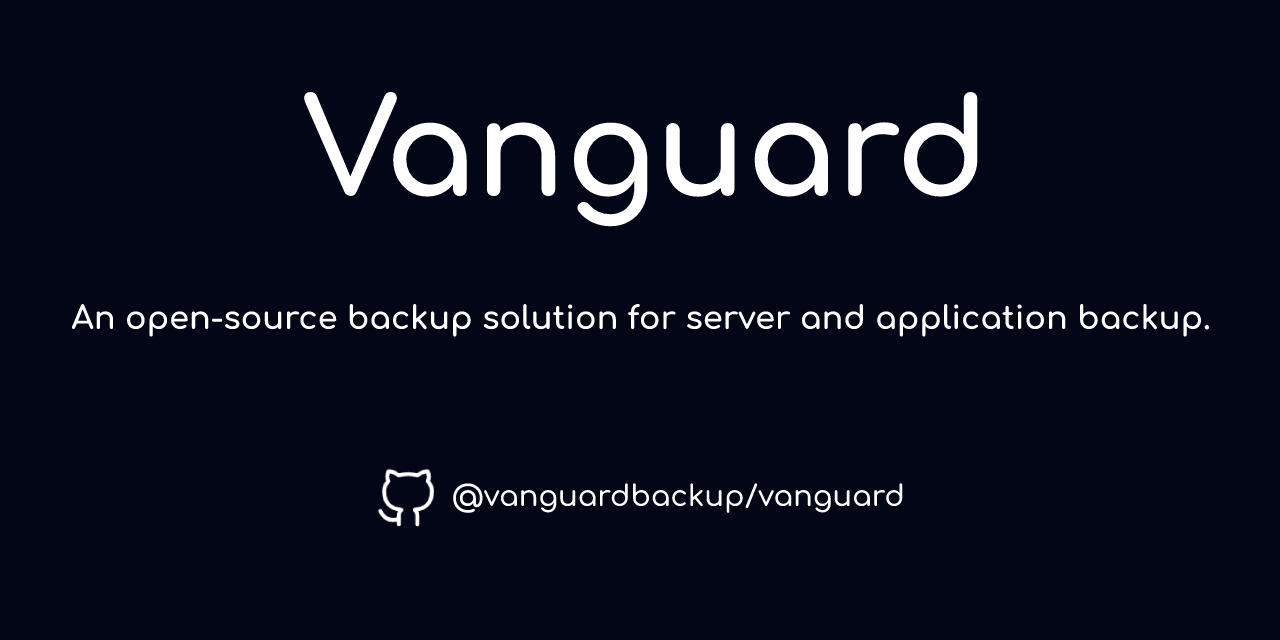
<style>
.page{position:relative;width:1280px;height:640px;background:#020617}
.page>*{position:absolute;margin:0}
.t1{font:133.2px "Comfortaa-Bold";color:#ffffff}
.t2{font:32px "Comfortaa-Bold";color:#ffffff}
.t3{font:29px "Comfortaa-SemiBold";color:#ffffff}
</style>
<div class="page">
<p class="t1" style="left:303px;top:91px;width:675px;height:136px">Vanguard</p>
<p class="t2" style="left:71px;top:304px;width:1139px;height:33px">An open-source backup solution for server and application backup.</p>
<p class="t3" style="left:453px;top:483px;width:450px;height:30px">@vanguardbackup/vanguard</p>
</div>
